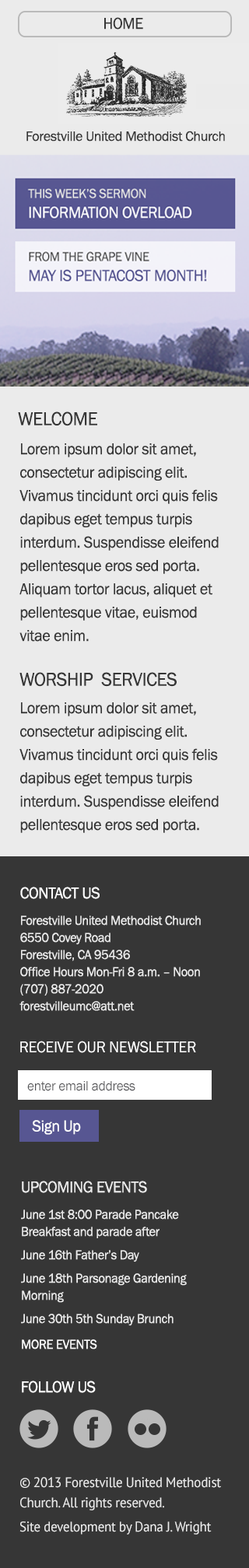
<style>
.page{position:relative;width:249px;height:1568px;background:#363636}
.page>*{position:absolute;margin:0}
.t1{font:16.3px "FranklinGothic-Book";letter-spacing:-0.02em;color:#363636;scale:0.96 1}
.t2{font:14px "FranklinGothic-Book";letter-spacing:-0.02em;color:#363636}
.t3{font:19.4px "FranklinGothic-Book";letter-spacing:-0.02em;color:#363636;scale:0.96 1}
.t4{font:16.3px/23.3px "FranklinGothic-Book";letter-spacing:-0.02em;color:#363636;scale:0.96 1}
.t5{font:13.2px/17.1px "FranklinGothic-Book";letter-spacing:-0.02em;color:#ebebeb;scale:0.96 1}
.t6{font:16.3px/6.7px "FranklinGothic-Book";letter-spacing:-0.02em;color:#ffffff;scale:0.96 1}
.t7{font:13.2px/26.4px "FranklinGothic-Book";letter-spacing:-0.02em;color:#ebebeb;scale:0.96 1}
.t8{font:16.3px "FranklinGothic-Book";letter-spacing:-0.02em;color:#ffffff;scale:0.96 1}
.t9{font:14px "FranklinGothic-Book";letter-spacing:-0.02em;color:#565659;scale:0.96 1}
.t10{font:13.2px/23.3px "FranklinGothic-Book";letter-spacing:-0.02em;color:#ebebeb;scale:0.96 1}
.t11{font:16.3px/15.6px "FranklinGothic-Book";letter-spacing:-0.02em;color:#ebebeb;scale:0.96 1}
.t12{font:13.2px/25.7px "FranklinGothic-Book";letter-spacing:-0.02em;color:#ffffff;scale:0.96 1}
.t13{font:14px/20.7px "PTSans-Regular";letter-spacing:-0.02em;color:#ebebeb;scale:0.96 1}
.t14{font:14px/23.8px "PTSans-Regular";letter-spacing:-0.02em;color:#ebebeb;scale:0.96 1}
</style>
<div class="page">
<p class="t1" style="left:104px;top:17px;width:39px;height:13px">HOME</p>
<p class="t2" style="left:26px;top:131px;width:199px;height:11px">Forestville United Methodist Church</p>
<p class="t3" style="left:18px;top:411px;width:79px;height:15px">WELCOME</p>
<p class="t4" style="left:19px;top:443px;width:200px;height:199px">Lorem ipsum dolor sit amet, consectetur adipiscing elit. Vivamus tincidunt orci quis felis dapibus eget tempus turpis interdum. Suspendisse eleifend pellentesque eros sed porta. Aliquam tortor lacus, aliquet et pellentesque vitae, euismod vitae enim.</p>
<p class="t3" style="left:19px;top:672px;width:158px;height:15px">WORSHIP  SERVICES</p>
<p class="t4" style="left:19px;top:702px;width:200px;height:131px">Lorem ipsum dolor sit amet, consectetur adipiscing elit. Vivamus tincidunt orci quis felis dapibus eget tempus turpis interdum. Suspendisse eleifend pellentesque eros sed porta.</p>
<p class="t5" style="left:19px;top:887px;width:182px;height:124px"><span class="t6">CONTACT US<br></span><span class="t7">Forestville United Methodist Church<br></span>6550 Covey Road<br>Forestville, CA 95436<br>Office Hours Mon-Fri 8 a.m. – Noon<br>(707) 887-2020<br>forestvilleumc@att.net</p>
<p class="t8" style="left:20px;top:1041px;width:176px;height:12px">RECEIVE OUR NEWSLETTER</p>
<p class="t9" style="left:27px;top:1081px;width:108px;height:10px">enter email address</p>
<p class="t8" style="left:32px;top:1120px;width:49px;height:15px">Sign Up</p>
<p class="t10" style="left:21px;top:1181px;width:166px;height:168px"><span class="t11">UPCOMING EVENTS<br></span><span class="t7">June 1st 8:00 Parade Pancake </span><span class="t5">Breakfast and parade after<br></span>June 16th Father’s Day<br>June 18th Parsonage Gardening<br><span class="t5">Morning<br></span>June 30th 5th Sunday Brunch<br><span class="t12">MORE EVENTS</span></p>
<p class="t8" style="left:22px;top:1381px;width:74px;height:12px">FOLLOW US</p>
<p class="t13" style="left:19px;top:1477px;width:202px;height:58px">© 2013 Forestville United Methodist Church. All rights reserved.  <br><span class="t14">Site development by Dana J. Wright</span></p>
</div>
